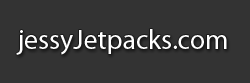
<style>
.page{position:relative;width:250px;height:83px;background:#333333}
.page>*{position:absolute;margin:0}
.t1{font:27.7px "MyriadPro-Regular";color:#ffffff}
</style>
<div class="page">
<p class="t1" style="left:16px;top:29px;width:211px;height:26px">jessyJetpacks.com</p>
</div>
